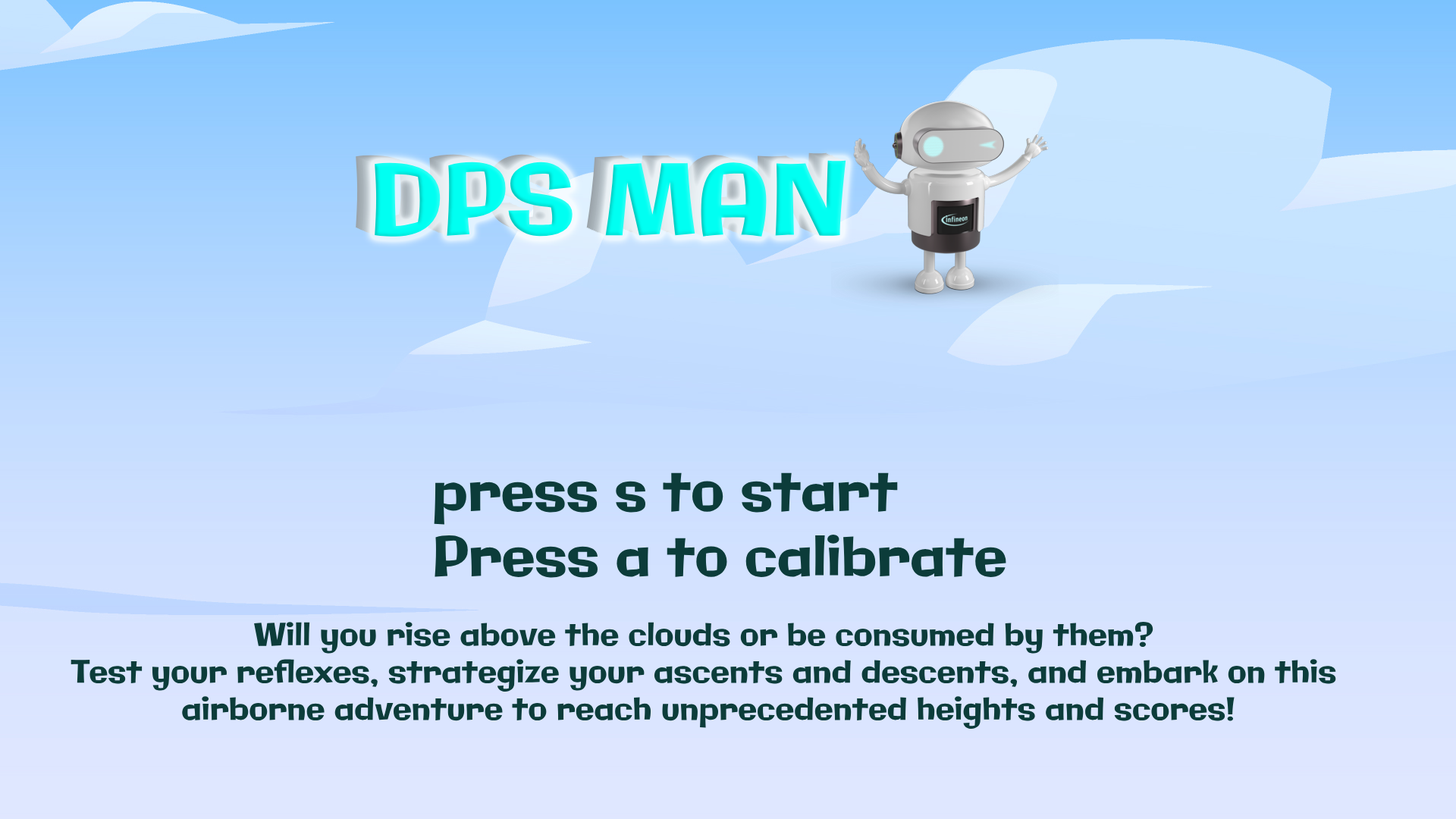
<style>
.page{position:relative;width:1456px;height:819px}
.page>*{position:absolute;margin:0}
.t1{font:97.1px "Galindo-Regular";color:#00fff2}
.t2{font:54.6px "Galindo-Regular";color:#0c3c3a}
.t3{font:31.1px "Galindo-Regular";color:#0c3c3a}
</style>
<div class="page">
<p class="t1" style="left:375px;top:160px;width:471px;height:77px">DPS MAN</p>
<p class="t2" style="left:434px;top:472px;width:572px;height:106px">press s to start<br>Press a to calibrate</p>
<p class="t3" style="left:71px;top:622px;width:1265px;height:107px;text-align:center">Will you rise above the clouds or be consumed by them? <br>Test your reflexes, strategize your ascents and descents, and embark on this <br>airborne adventure to reach unprecedented heights and scores!</p>
</div>
